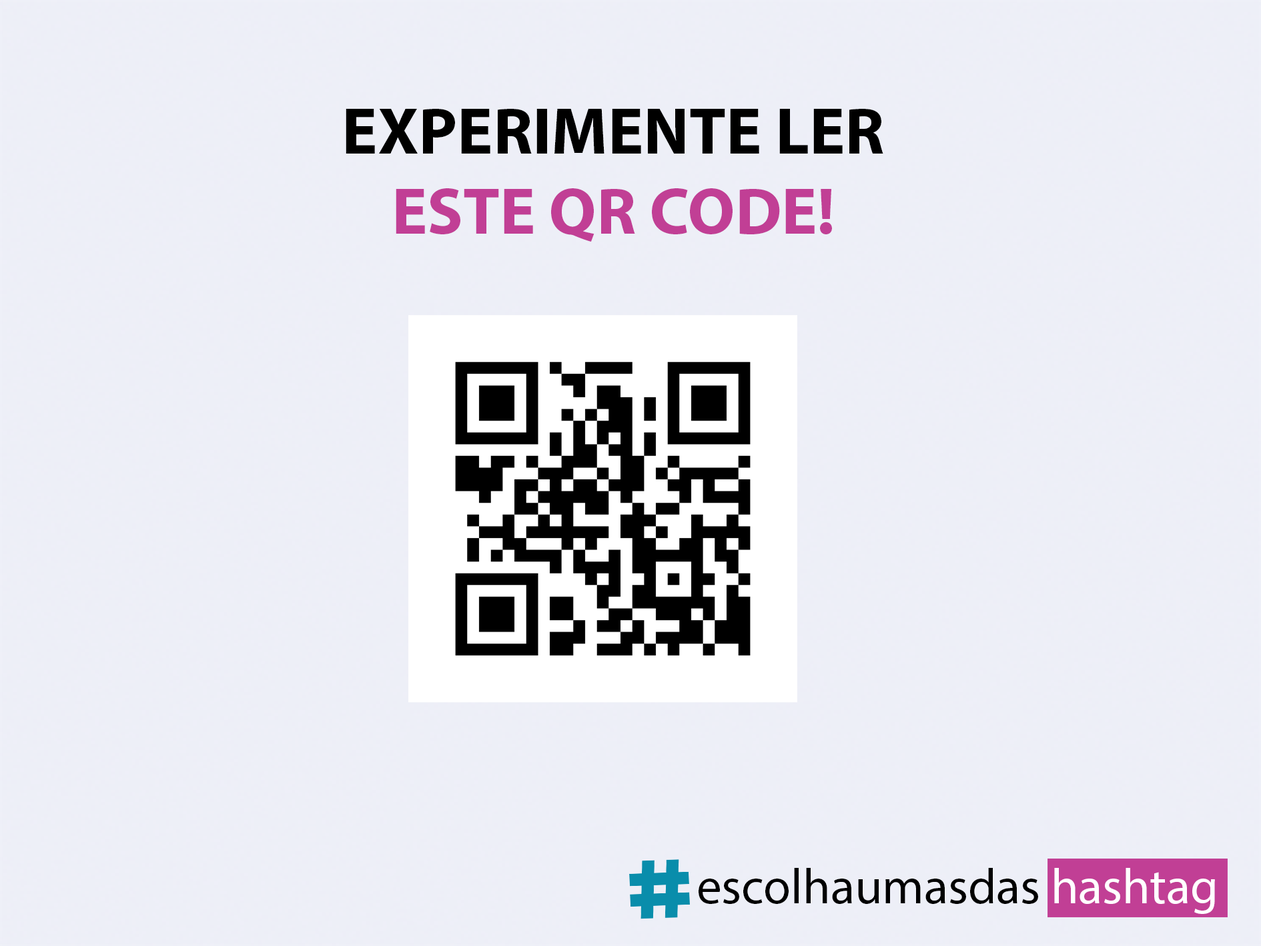
<style>
.page{position:relative;width:1261px;height:946px;background:#edeff7}
.page>*{position:absolute;margin:0}
.t1{font:66.7px "MyriadPro-Bold";color:#000000}
.t2{font:66.7px "MyriadPro-Bold";color:#c13f95}
.t3{font:50px "MyriadPro-Regular";color:#000000}
.t4{font:50px "MyriadPro-Regular";color:#ffffff}
</style>
<div class="page">
<p class="t1" style="left:346px;top:109px;width:537px;height:133px;text-align:center">EXPERIMENTE LER<span class="t2"> <br>ESTE QR CODE!</span></p>
<p class="t3" style="left:699px;top:867px;width:516px;height:46px">escolhaumasdas <span class="t4">hashtag</span></p>
</div>
